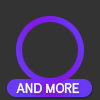
<style>
.page{position:relative;width:100px;height:100px;background:#333333}
.page>*{position:absolute;margin:0}
.t1{font:14px "KayakSans-Bold";color:#fbfbfb}
</style>
<div class="page">
<p class="t1" style="left:16px;top:83px;width:64px;height:11px">AND MORE</p>
</div>
